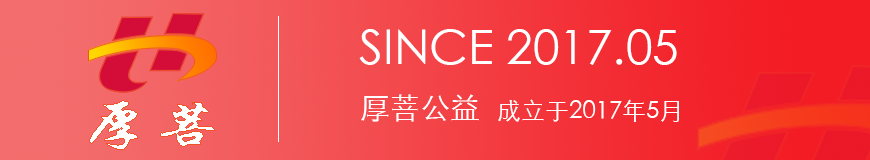
<style>
.page{position:relative;width:870px;height:160px}
.page>*{position:absolute;margin:0}
.t1{font:48px "STXihei";color:#ffffff}
.t2{font:24px "AdobeHeitiStd-Regular";color:#ffffff}
.t3{font:30px "STXihei";color:#ffffff}
.t4{font:24px "STXihei";color:#ffffff}
</style>
<div class="page">
<p class="t1" style="left:359px;top:29px;width:318px;height:36px">SINCE 2017.05<br><span class="t2"><br><br><br>酷秀</span></p>
<p class="t3" style="left:361px;top:94px;width:118px;height:28px">厚菩公益</p>
<p class="t4" style="left:498px;top:99px;width:181px;height:23px">成立于2017年5月</p>
</div>
